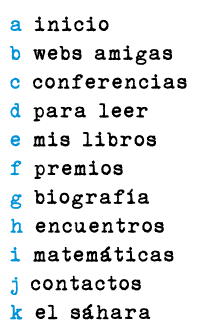
<style>
.page{position:relative;width:198px;height:334px;background:#ffffff}
.page>*{position:absolute;margin:0}
.t1{font:24px "urania_czech";color:#000000}
.t2{font:24px "urania_czech";color:#0093d8}
</style>
<div class="page">
<p class="t1" style="left:9px;top:16px;width:178px;height:304px"><span class="t2">a </span>inicio<br><span class="t2">b </span>webs amigas<br><span class="t2">c </span>conferencias<br><span class="t2">d </span>para leer<br><span class="t2">e </span>mis libros<br><span class="t2">f </span>premios<br><span class="t2">g </span>biografía<br><span class="t2">h </span>encuentros<br><span class="t2">i </span>matemáticas<br><span class="t2">j</span> contactos<br><span class="t2">k</span> el sáhara</p>
</div>
